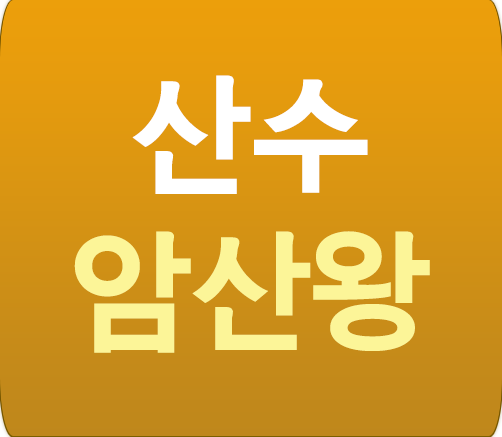
<style>
.page{position:relative;width:502px;height:437px}
.page>*{position:absolute;margin:0}
.t1{font:130px "BareunDotum-3";color:#fcf598}
.t2{font:130px "BareunDotum-3";color:#ffffff}
</style>
<div class="page">
<p class="t1" style="left:74px;top:75px;width:356px;height:278px;text-align:center"><span class="t2">산수<br></span>암산왕</p>
</div>
